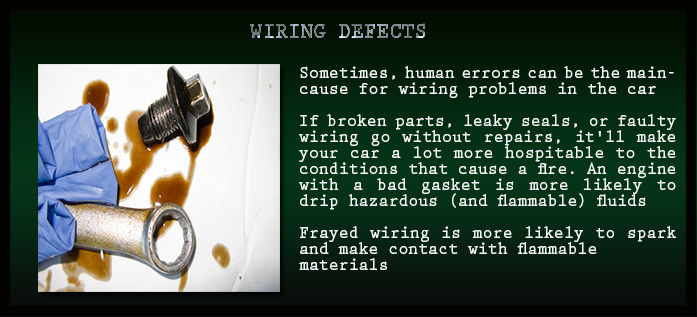
<style>
.page{position:relative;width:697px;height:317px}
.page>*{position:absolute;margin:0}
.t1{font:22.2px "PrestigeEliteStd-Bd";letter-spacing:0.002em;scale:0.95 1}
.t2{font:17.6px/16px "PrestigeEliteStd-Bd";letter-spacing:0.002em;color:#f4f8f6;scale:0.94 1}
</style>
<div class="page">
<p class="t1" style="left:250px;top:23px;width:175px;height:15px">WIRING DEFECTS</p>
<p class="t2" style="left:299px;top:66px;width:377px;height:204px;text-align:justify">Sometimes, human errors can be the maincause for wiring problems in the car <br><br>If broken parts, leaky seals, or faulty wiring go without repairs, it'll make your car a lot more hospitable to the conditions that cause a fire. An engine with a bad gasket is more likely to drip hazardous (and flammable) fluids<br><br>Frayed wiring is more likely to spark and make contact with flammable <br>materials</p>
</div>
